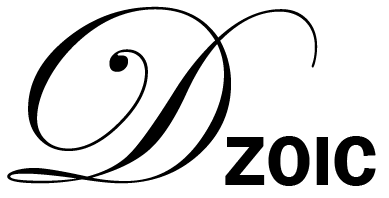
<style>
.page{position:relative;width:389px;height:198px;background:#ffffff}
.page>*{position:absolute;margin:0}
.t1{font:260px "EdwardianScriptITC";color:#000000}
.t2{font:72px "FranklinGothic-Demi";color:#000000}
</style>
<div class="page">
<p class="t1" style="left:7px;top:6px;width:311px;height:178px">D</p>
<p class="t2" style="left:225px;top:136px;width:151px;height:50px">ZOIC</p>
</div>
